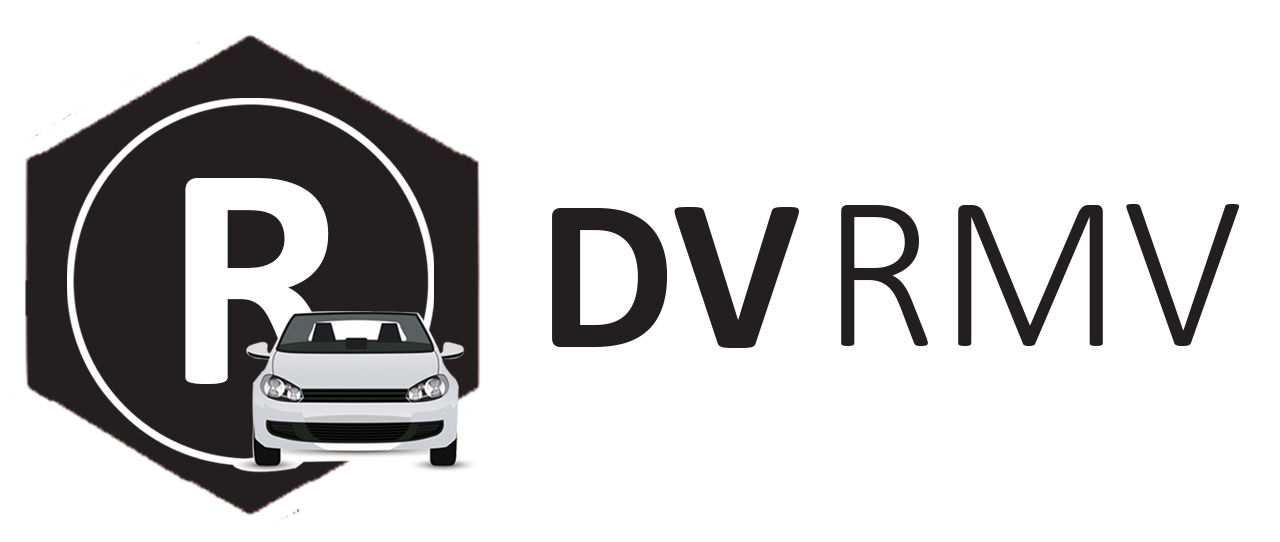
<style>
.page{position:relative;width:1280px;height:542px;background:#ffffff}
.page>*{position:absolute;margin:0}
.t1{font:325.4px "Calibri-Bold";color:#ffffff}
.t2{font:220.5px "Calibri-Bold";color:#231f21}
.t3{font:221px "Calibri-Light";color:#231f21}
</style>
<div class="page">
<p class="t1" style="left:185px;top:178px;width:154px;height:206px">R</p>
<p class="t2" style="left:552px;top:207px;width:247px;height:141px">DV</p>
<p class="t3" style="left:841px;top:204px;width:399px;height:142px">RMV</p>
</div>
